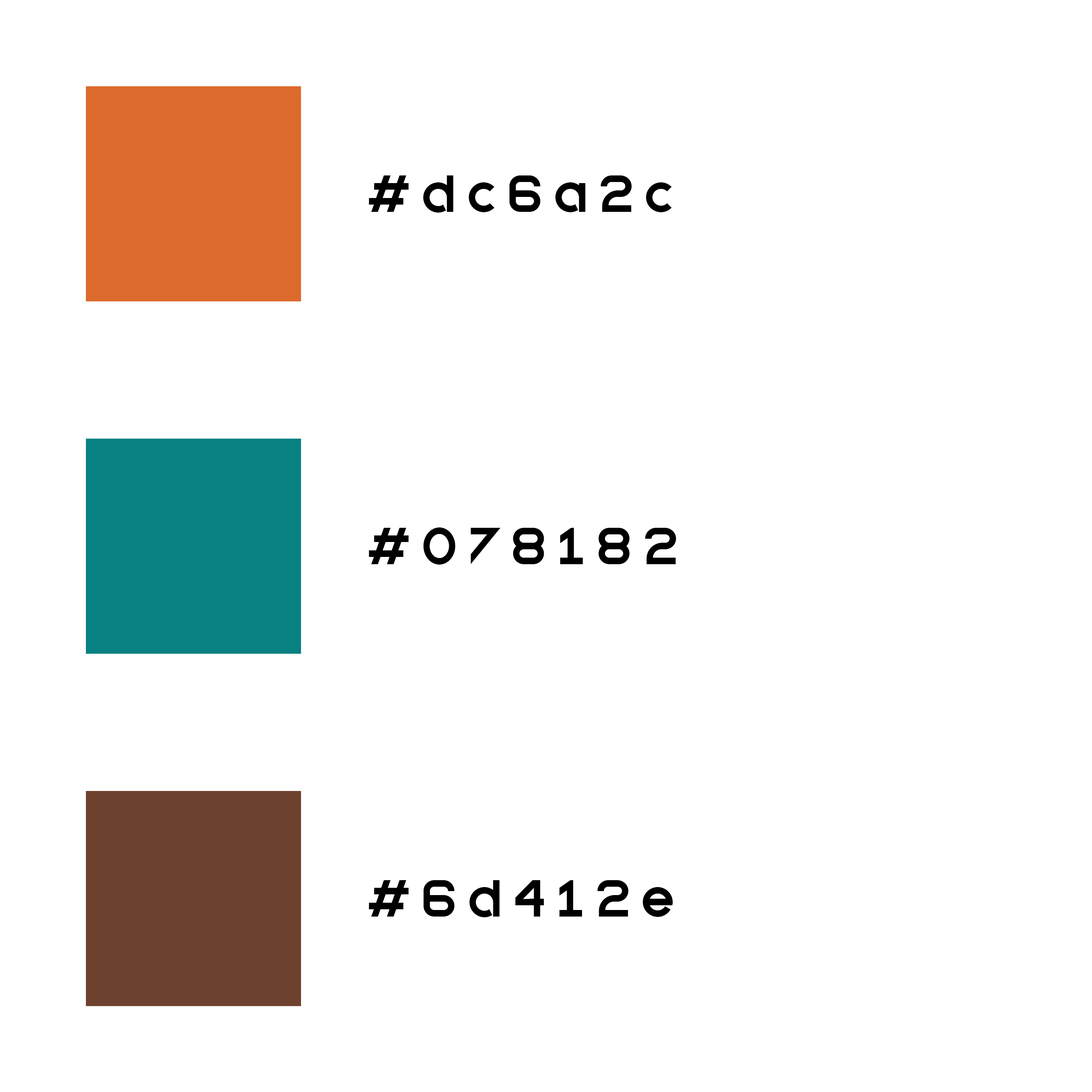
<style>
.page{position:relative;width:1092px;height:1092px;background:#ffffff}
.page>*{position:absolute;margin:0}
.t1{font:36.4px "QuantifyBold";letter-spacing:0.34em;color:#000000}
</style>
<div class="page">
<p class="t1" style="left:369px;top:175px;width:303px;height:38px">#dc6a2c</p>
<p class="t1" style="left:369px;top:527px;width:307px;height:38px">#078182</p>
<p class="t1" style="left:369px;top:880px;width:304px;height:37px">#6d412e</p>
</div>
